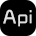
<style>
.page{position:relative;width:36px;height:36px;background:#000000}
.page>*{position:absolute;margin:0}
.t1{font:18px "TRENDS";letter-spacing:0.08em;color:#dddddd}
</style>
<div class="page">
<p class="t1" style="left:3px;top:9px;width:29px;height:18px">Api</p>
</div>
